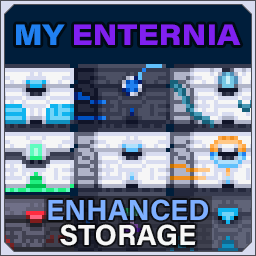
<style>
.page{position:relative;width:256px;height:256px}
.page>*{position:absolute;margin:0}
.t1{font:29.2px "AcuminConcept_760.000wght_112.000wdth";color:#8020f0}
.t2{font:29.2px "AcuminConcept_760.000wght_112.000wdth";color:#2080f0}
.t3{font:29.2px/25px "AcuminConcept-Bold";color:#7eafff}
.t4{font:29.2px/25px "AcuminConcept-Bold";color:#f6f6f6}
</style>
<div class="page">
<p class="t1" style="left:16px;top:24px;width:225px;height:21px"><span class="t2">MY </span>ENTERNIA</p>
<p class="t3" style="left:48px;top:199px;width:160px;height:47px;text-align:center">ENHANCED<br><span class="t4">STORAGE</span></p>
</div>
